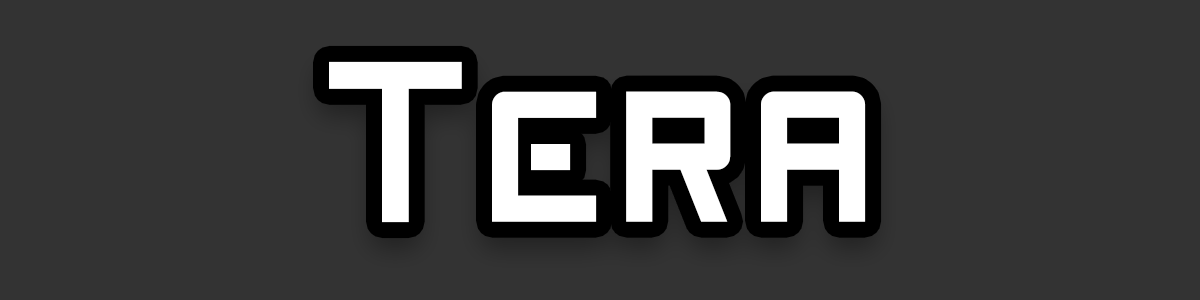
<style>
.page{position:relative;width:1200px;height:300px;background:#333333}
.page>*{position:absolute;margin:0}
.t1{font:208.3px "Dynamix";color:#ffffff}
</style>
<div class="page">
<p class="t1" style="left:329px;top:61px;width:537px;height:162px">Tera</p>
</div>
